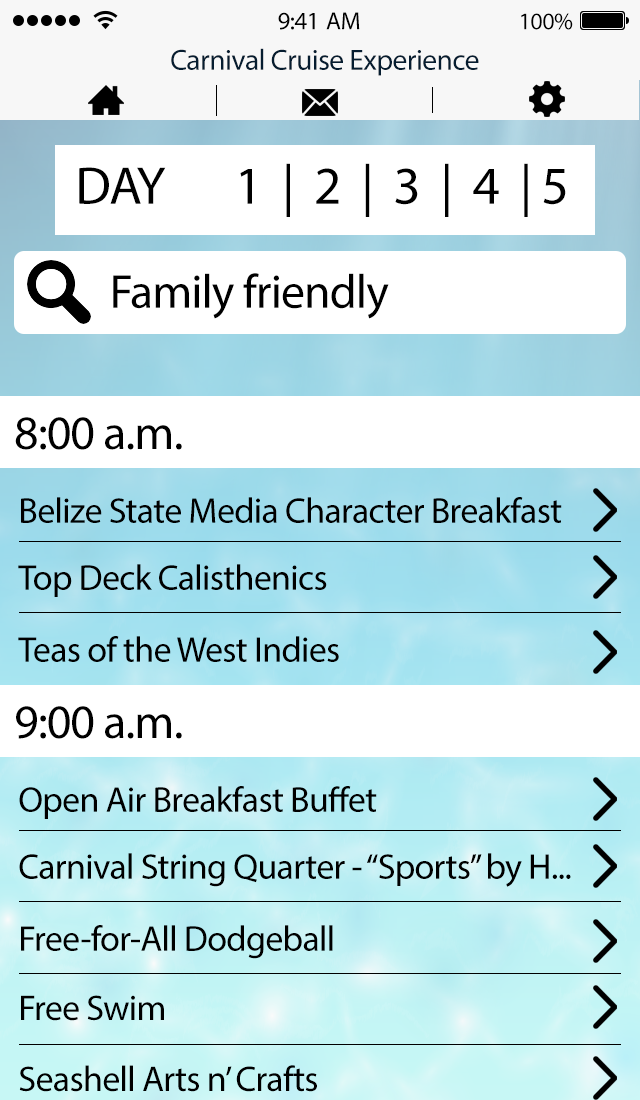
<style>
.page{position:relative;width:640px;height:1100px;background:#ffffff}
.page>*{position:absolute;margin:0}
.t1{font:25px "MyriadPro-Regular";letter-spacing:-0.02em;color:#000000}
.t2{font:24px "MyriadPro-Regular";letter-spacing:-0.02em;color:#000000}
.t3{font:29.4px "MyriadPro-Regular";letter-spacing:-0.02em;color:#061d30}
.t4{font:53.4px "MyriadPro-Regular";letter-spacing:-0.02em;color:#000000}
.t5{font:48px "MyriadPro-Regular";letter-spacing:-0.02em;color:#000000}
.t6{font:36px "MyriadPro-Regular";letter-spacing:-0.02em;color:#000000}
</style>
<div class="page">
<p class="t1" style="left:278px;top:12px;width:82px;height:18px">9:41 AM</p>
<p class="t2" style="left:521px;top:13px;width:52px;height:17px">100%</p>
<p class="t3" style="left:171px;top:48px;width:308px;height:28px">Carnival Cruise Experience</p>
<p class="t4" style="left:79px;top:163px;width:487px;height:54px">DAY 1  |  2  |  3  |  4  | 5</p>
<p class="t5" style="left:113px;top:273px;width:276px;height:46px">Family friendly</p>
<p class="t5" style="left:15px;top:417px;width:167px;height:33px">8:00 a.m.</p>
<p class="t6" style="left:21px;top:497px;width:541px;height:26px">Belize State Media Character Breakfast</p>
<p class="t6" style="left:18px;top:564px;width:309px;height:33px">Top Deck Calisthenics</p>
<p class="t6" style="left:18px;top:636px;width:321px;height:26px">Teas of the West Indies</p>
<p class="t5" style="left:16px;top:706px;width:166px;height:33px">9:00 a.m.</p>
<p class="t6" style="left:19px;top:786px;width:358px;height:33px">Open Air Breakfast Buffet</p>
<p class="t6" style="left:19px;top:853px;width:552px;height:34px">Carnival String Quarter - “Sports” by H...</p>
<p class="t6" style="left:21px;top:925px;width:312px;height:34px">Free-for-All Dodgeball</p>
<p class="t6" style="left:21px;top:995px;width:143px;height:26px">Free Swim</p>
<p class="t6" style="left:19px;top:1065px;width:298px;height:27px">Seashell Arts n’ Crafts</p>
</div>
